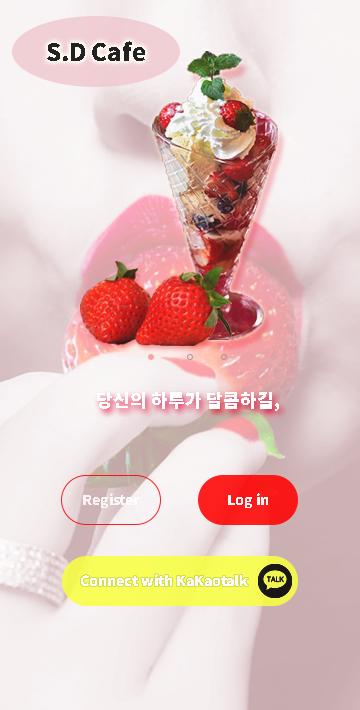
<style>
.page{position:relative;width:360px;height:710px}
.page>*{position:absolute;margin:0}
.t1{font:24px "NotoSansKR-Black";color:#232222}
.t2{font:18px "NotoSansKR-Black";color:#ffffff}
.t3{font:14px "NotoSansKR-Black";color:#ffffff}
</style>
<div class="page">
<p class="t1" style="left:47px;top:41px;width:98px;height:20px">S.D Cafe</p>
<p class="t2" style="left:97px;top:392px;width:182px;height:19px">당신의 하루가 달콤하길,</p>
<p class="t3" style="left:83px;top:493px;width:57px;height:15px">Register</p>
<p class="t3" style="left:228px;top:493px;width:40px;height:15px">Log in</p>
<p class="t3" style="left:81px;top:574px;width:167px;height:12px">Connect with KaKaotalk</p>
</div>
